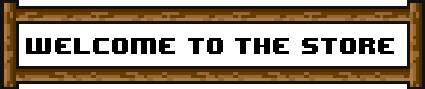
<style>
.page{position:relative;width:425px;height:89px;background:#ffffff}
.page>*{position:absolute;margin:0}
.t1{font:19.6px "8BITWONDERNominal";color:#000000;scale:0.97 1}
</style>
<div class="page">
<p class="t1" style="left:26px;top:38px;width:368px;height:16px">welcome to the store</p>
</div>
